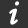
<style>
.page{position:relative;width:28px;height:28px;background:#333333}
.page>*{position:absolute;margin:0}
.t1{font:35px "MonotypeCorsiva";color:#ffffff;font-weight:bold}
</style>
<div class="page">
<p class="t1" style="left:9px;top:1px;width:10px;height:24px">i</p>
</div>
